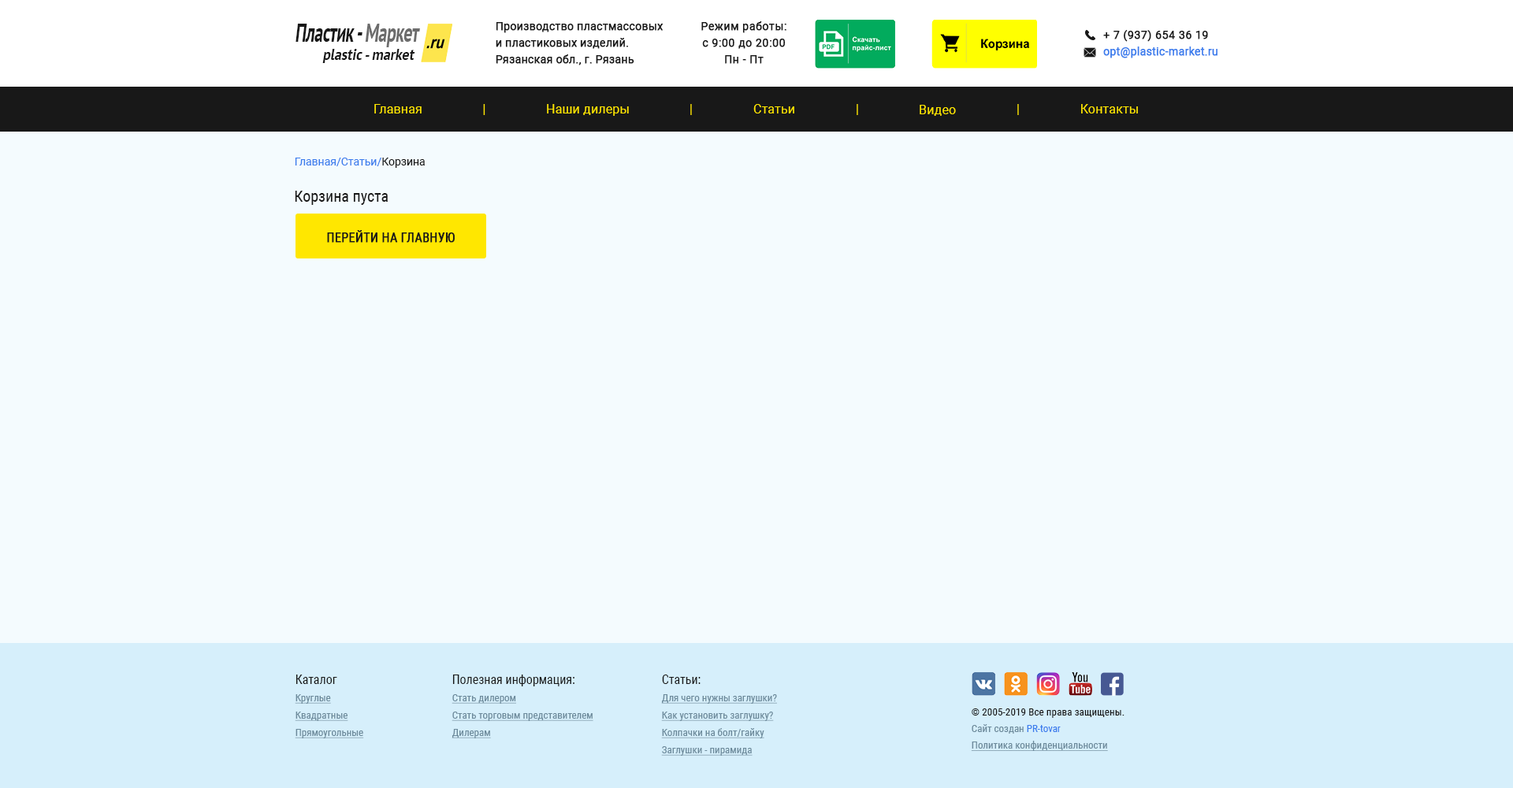
<style>
.page{position:relative;width:1513px;height:788px;background:#f4fbfe}
.page>*{position:absolute;margin:0}
.t1{font:26px "PTSans-Bold";letter-spacing:-0.025em;color:#181818;font-style:italic;scale:0.67 1}
.t2{font:26px "PTSans-Bold";letter-spacing:-0.025em;color:#6c6c6c;font-style:italic;scale:0.67 1}
.t3{font:11px/16.5px "Roboto-Regular";color:#181818;font-weight:bold}
.t4{font:11px/16.5px "Roboto-Regular";letter-spacing:0.02em;color:#181818;font-weight:bold}
.t5{font:11px/16.5px "Roboto-Regular";color:#3b7ded;font-weight:bold}
.t6{font:15.6px "PTSans-Bold";letter-spacing:-0.005em;color:#181818;font-style:italic;scale:0.91 1}
.t7{font:12.6px "Roboto-Regular";letter-spacing:0.01em;color:#ffe600}
.t8{font:12.6px "Roboto-Regular";letter-spacing:0.01em}
.t9{font:11px "Roboto-Regular";color:#3b7ded}
.t10{font:11px "Roboto-Regular";color:#181818}
.t11{font:15.8px "RobotoCondensed-Regular";color:#181818}
.t12{font:12.6px "RobotoCondensed-Regular";color:#181818;font-weight:bold}
.t13{font:10.2px/17.3px "RobotoCondensed-Regular";color:#6c8a9b;text-decoration:underline}
.t14{font:12.6px/17.3px "RobotoCondensed-Regular";color:#181818}
.t15{font:10.2px "RobotoCondensed-Regular";letter-spacing:0.01em;color:#181818}
.t16{font:10.2px "RobotoCondensed-Regular";color:#6c8a9b}
.t17{font:10.2px "RobotoCondensed-Regular";color:#3b7ded}
.t18{font:10.2px "RobotoCondensed-Regular";color:#6c8a9b;text-decoration:underline}
</style>
<div class="page">
<p class="t1" style="left:296px;top:24px;width:124px;height:23px">Пластик - <span class="t2">Маркет</span></p>
<p class="t3" style="left:496px;top:22px;width:168px;height:43px">Производство пластмассовых <br>и пластиковых изделий.<br>Рязанская обл., г. Рязань</p>
<p class="t4" style="left:701px;top:21px;width:85px;height:43px;text-align:center">Режим работы:<br>с 9:00 до 20:00<br>Пн - Пт</p>
<p class="t5" style="left:1103px;top:30px;width:115px;height:28px"><span class="t4">+ 7 (937) 654 36 19<br></span>opt@plastic-market.ru</p>
<p class="t6" style="left:322px;top:49px;width:93px;height:14px">plastic - market</p>
<p class="t7" style="left:374px;top:104px;width:48px;height:9px">Главная</p>
<p class="t7" style="left:483px;top:104px;width:2px;height:11px">|</p>
<p class="t7" style="left:547px;top:104px;width:82px;height:12px">Наши дилеры</p>
<p class="t8" style="left:690px;top:104px;width:2px;height:11px">|</p>
<p class="t7" style="left:753px;top:104px;width:41px;height:9px">Статьи</p>
<p class="t8" style="left:857px;top:104px;width:1px;height:11px">|</p>
<p class="t7" style="left:920px;top:105px;width:36px;height:11px">Видео</p>
<p class="t8" style="left:1017px;top:104px;width:2px;height:11px">|</p>
<p class="t7" style="left:1081px;top:104px;width:57px;height:9px">Контакты</p>
<p class="t9" style="left:295px;top:158px;width:130px;height:10px">Главная/Статьи/<span class="t10">Корзина</span></p>
<p class="t11" style="left:295px;top:191px;width:93px;height:14px">Корзина пуста</p>
<p class="t12" style="left:327px;top:230px;width:128px;height:13px">ПЕРЕЙТИ НА ГЛАВНУЮ</p>
<p class="t13" style="left:295px;top:675px;width:69px;height:63px"><span class="t14">Каталог<br></span>Круглые<br>Квадратные<br>Прямоугольные</p>
<p class="t13" style="left:452px;top:675px;width:141px;height:63px"><span class="t14">Полезная информация:<br></span>Стать дилером<br>Стать торговым представителем<br>Дилерам</p>
<p class="t13" style="left:661px;top:675px;width:116px;height:81px"><span class="t14">Статьи:<br></span>Для чего нужны заглушки?<br>Как установить заглушку?<br>Колпачки на болт/гайку<br>Заглушки - пирамида</p>
<p class="t15" style="left:972px;top:708px;width:153px;height:10px">© 2005-2019 Все права защищены.</p>
<p class="t16" style="left:972px;top:724px;width:89px;height:10px">Сайт создан <span class="t17">PR-tovar</span></p>
<p class="t18" style="left:971px;top:741px;width:137px;height:10px">Политика конфиденциальности</p>
</div>
